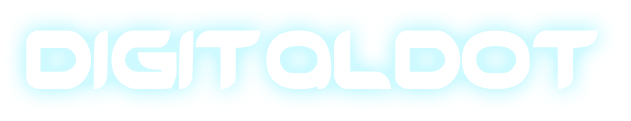
<style>
.page{position:relative;width:631px;height:121px;background:#ffffff}
.page>*{position:absolute;margin:0}
.t1{font:116.7px "FREEDOM";color:#ffffff;scale:0.85 1}
</style>
<div class="page">
<p class="t1" style="left:26px;top:30px;width:572px;height:59px">DIGITALDOT</p>
</div>
